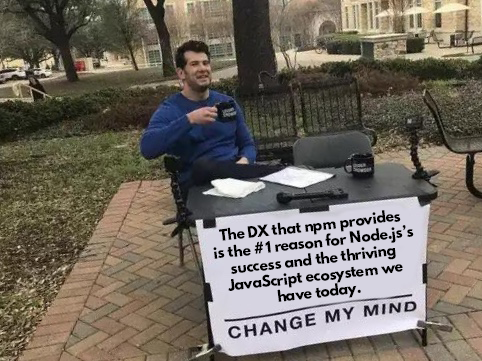
<style>
.page{position:relative;width:482px;height:361px}
.page>*{position:absolute;margin:0}
.t1{font:14px "LeagueSpartan-Bold";letter-spacing:-0.02em;color:#000000}
</style>
<div class="page">
<p class="t1" style="left:213px;top:210px;width:201px;height:92px;text-align:center;rotate:-6deg">The DX that npm provides <br>is the #1 reason for Node.js’s<br>success and the thriving <br>JavaScript ecosystem we <br>have today.</p>
</div>
